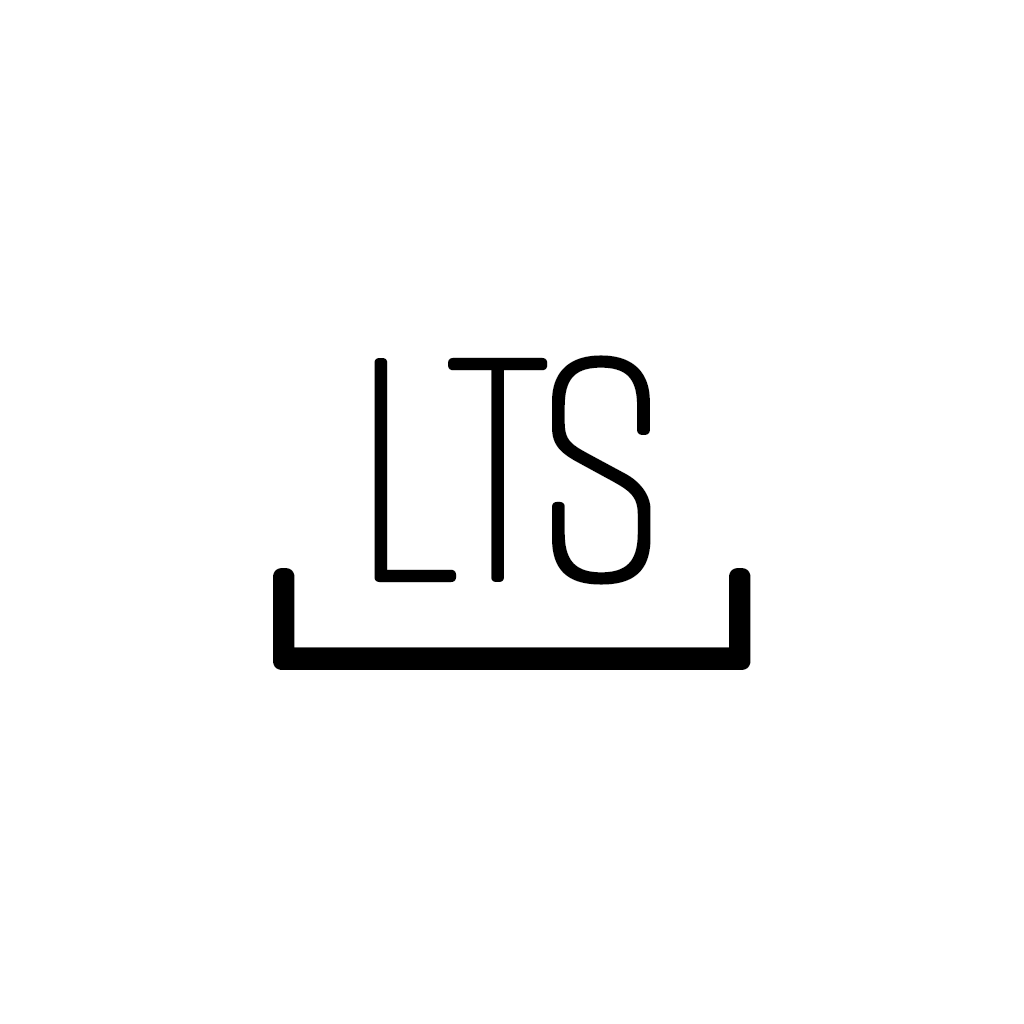
<style>
.page{position:relative;width:1024px;height:1024px;background:#ffffff}
.page>*{position:absolute;margin:0}
.t1{font:320px "RiftSoft-Light";color:#000000;text-transform:uppercase}
.t2{font:320px "RiftSoft-Light";letter-spacing:-0.06em;color:#000000;text-transform:uppercase}
.t3{font:320px "RiftSoft-Light";letter-spacing:0.12em;color:#000000;text-transform:uppercase}
.t4{font:600px "RiftSoft-Light";color:#000000;text-transform:uppercase}
</style>
<div class="page">
<p class="t1" style="left:374px;top:355px;width:277px;height:230px">L<span class="t2">T</span><span class="t3">S</span></p>
<p class="t4" style="left:273px;top:568px;width:478px;height:102px;rotate:-90deg">[</p>
</div>
